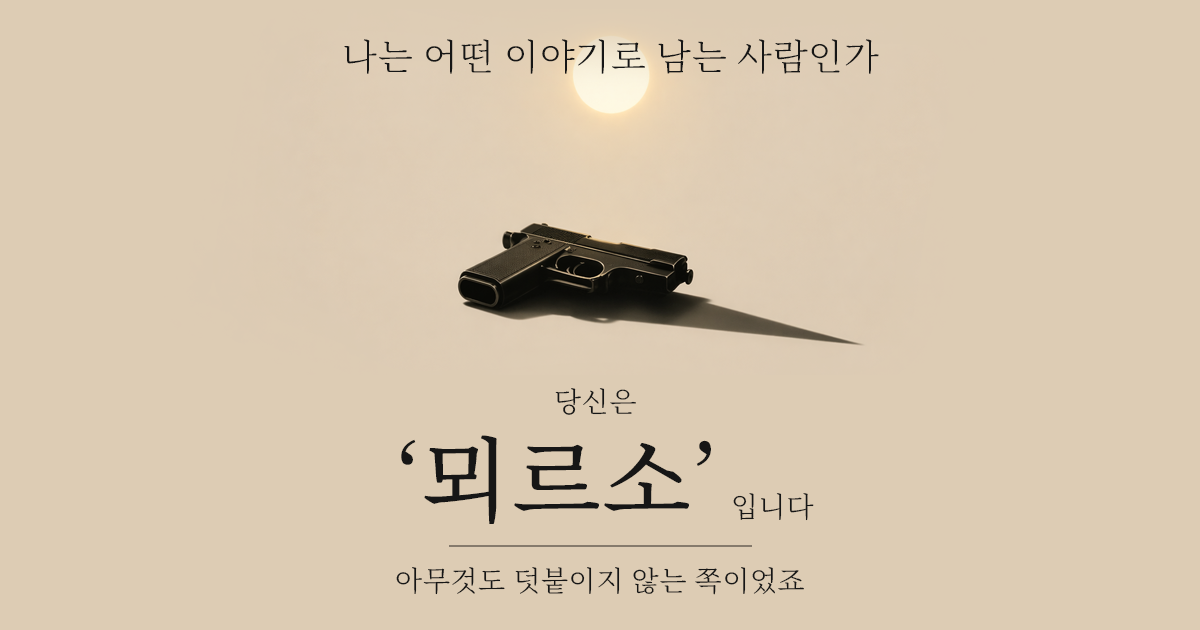
<style>
.page{position:relative;width:1200px;height:630px;background:#ddccb4}
.page>*{position:absolute;margin:0}
.t1{font:36px "NotoSerifKR-Light";letter-spacing:0.02em;color:#161616}
.t2{font:28px "NotoSerifKR-Light";letter-spacing:0.02em;color:#161616}
.t3{font:92px "NotoSerifKR-Medium";letter-spacing:0.02em;color:#161616}
</style>
<div class="page">
<p class="t1" style="left:344px;top:39px;width:535px;height:35px">나는 어떤 이야기로 남는 사람인가</p>
<p class="t2" style="left:555px;top:388px;width:81px;height:27px">당신은</p>
<p class="t3" style="left:401px;top:435px;width:310px;height:89px">‘뫼르소’</p>
<p class="t2" style="left:733px;top:493px;width:81px;height:28px">입니다</p>
<p class="t2" style="left:396px;top:567px;width:408px;height:28px">아무것도 덧붙이지 않는 쪽이었죠</p>
</div>
